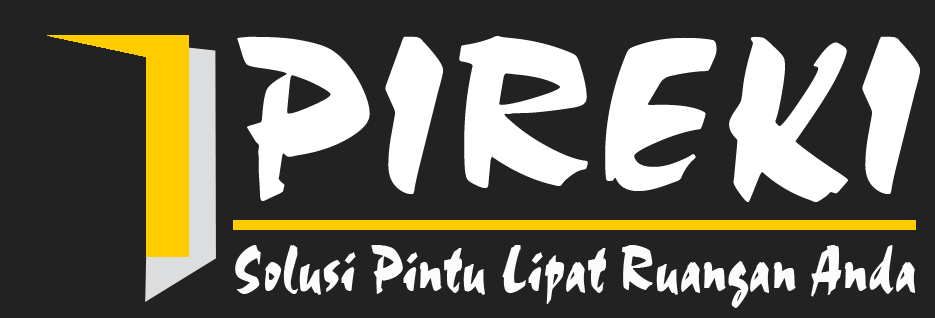
<style>
.page{position:relative;width:935px;height:318px;background:#222222}
.page>*{position:absolute;margin:0}
.t1{font:228.7px "Chandler";color:#ffffff}
.t2{font:68.7px "Chandler";color:#fcfcfc;scale:0.81 1}
</style>
<div class="page">
<p class="t1" style="left:237px;top:35px;width:683px;height:167px">PIREKI</p>
<p class="t2" style="left:235px;top:245px;width:680px;height:63px">Solusi Pintu Lipat Ruangan Anda</p>
</div>
